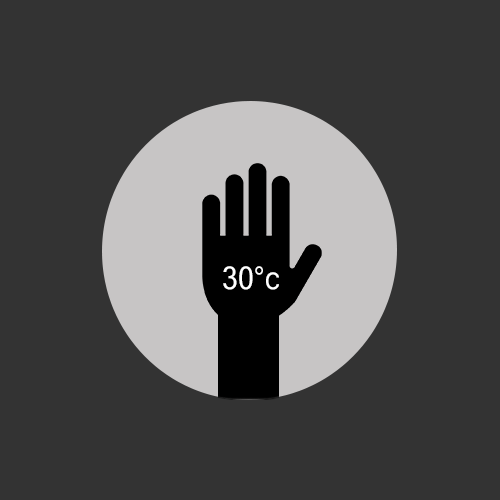
<style>
.page{position:relative;width:500px;height:500px;background:#333333}
.page>*{position:absolute;margin:0}
.t1{font:31.4px "MicrosoftSansSerif";color:#ffffff;scale:0.9 1}
</style>
<div class="page">
<p class="t1" style="left:223px;top:266px;width:56px;height:24px">30°c</p>
</div>
